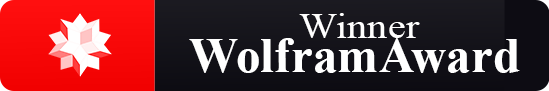
<style>
.page{position:relative;width:549px;height:91px}
.page>*{position:absolute;margin:0}
.t1{font:36.5px "TimesNewRomanPSMT";color:#ffffff;scale:1.11 1}
.t2{font:50.4px "TimesNewRomanPS-BoldMT";color:#ffffff}
</style>
<div class="page">
<p class="t1" style="left:299px;top:13px;width:121px;height:25px">Winner</p>
<p class="t2" style="left:189px;top:38px;width:331px;height:35px">WolframAward</p>
</div>
